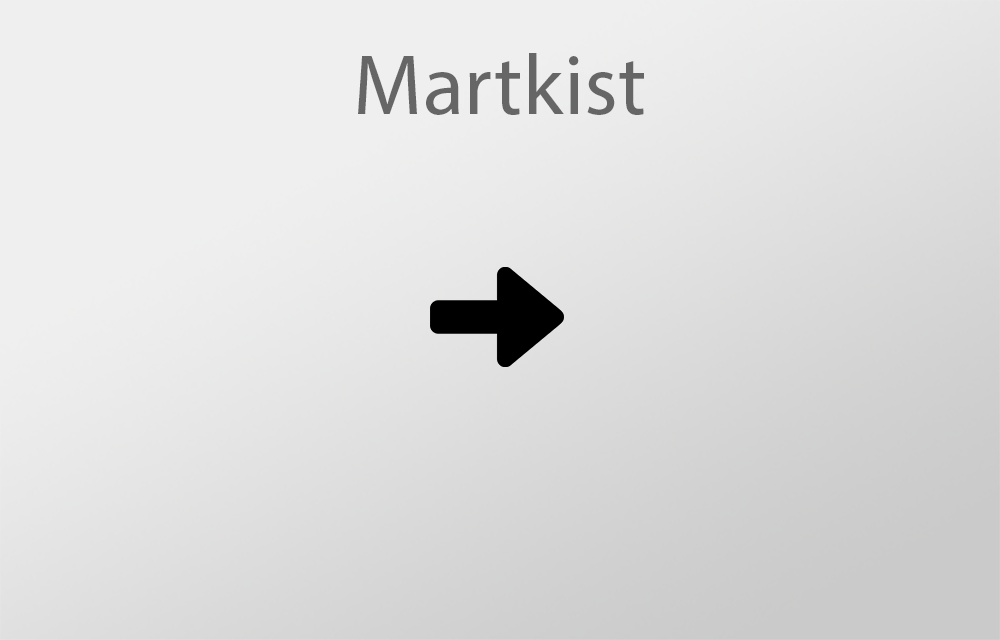
<style>
.page{position:relative;width:1000px;height:640px}
.page>*{position:absolute;margin:0}
.t1{font:85.7px "MyriadPro-Regular";color:#666666}
</style>
<div class="page">
<p class="t1" style="left:358px;top:53px;width:286px;height:62px">Martkist</p>
</div>
